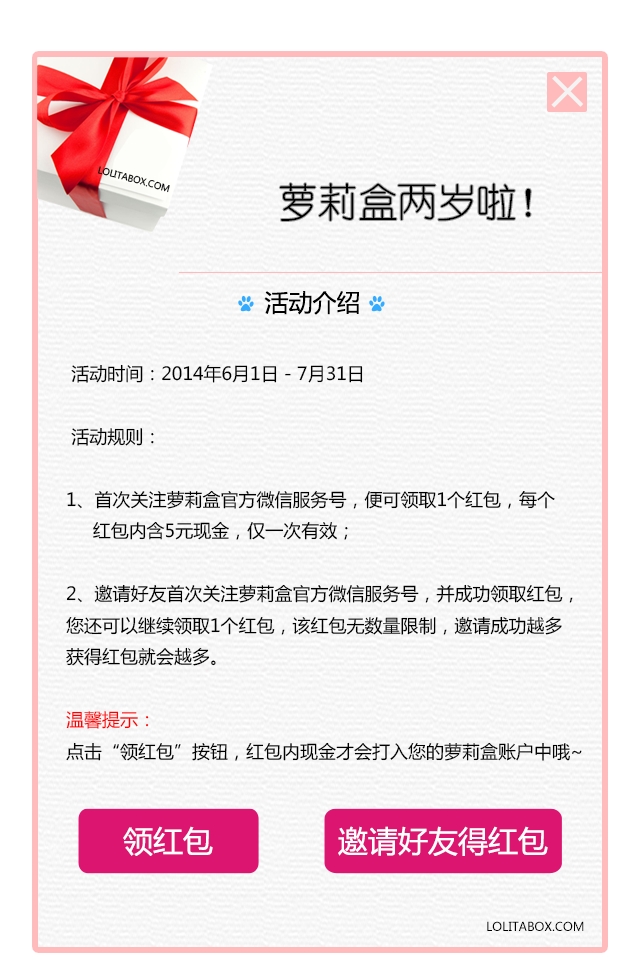
<style>
.page{position:relative;width:640px;height:960px}
.page>*{position:absolute;margin:0}
.t1{font:9px "MicrosoftYaHei";color:#000000}
.t2{font:39.8px "YouYuan";color:#000000}
.t3{font:24px "MicrosoftYaHei";color:#000000}
.t4{font:18px "MicrosoftYaHei";color:#000000}
.t5{font:18px "MicrosoftYaHei";color:#ff0000}
.t6{font:30px "MicrosoftYaHei";color:#ffffff}
.t7{font:12px "MicrosoftYaHei";color:#000000}
</style>
<div class="page">
<p class="t1" style="left:98px;top:166px;width:72px;height:27px;rotate:15deg">LOLITABOX.COM</p>
<p class="t2" style="left:279px;top:183px;width:252px;height:38px">萝莉盒两岁啦！</p>
<p class="t3" style="left:264px;top:291px;width:95px;height:24px">活动介绍</p>
<p class="t4" style="left:66px;top:364px;width:516px;height:397px">活动时间：2014年6月1日 - 7月31日<br><br> 活动规则：<br><br>1、首次关注萝莉盒官方微信服务号，便可领取1个红包，每个<br>     红包内含5元现金，仅一次有效；<br><br>2、邀请好友首次关注萝莉盒官方微信服务号，并成功领取红包，<br>您还可以继续领取1个红包，该红包无数量限制，邀请成功越多<br>获得红包就会越多。<br> <br><span class="t5">温馨提示：<br></span>点击“领红包”按钮，红包内现金才会打入您的萝莉盒账户中哦~</p>
<p class="t6" style="left:123px;top:826px;width:90px;height:30px">领红包</p>
<p class="t6" style="left:338px;top:826px;width:210px;height:30px">邀请好友得红包</p>
<p class="t7" style="left:487px;top:921px;width:97px;height:10px">LOLITABOX.COM</p>
</div>
